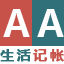
<style>
.page{position:relative;width:64px;height:64px;background:#2f7079}
.page>*{position:absolute;margin:0}
.t1{font:36px "MicrosoftYaHei";letter-spacing:0.18em;color:#fffefe}
.t2{font:14px "MicrosoftYaHei";letter-spacing:0.15em;color:#2f7079;font-weight:bold}
.t3{font:14px "MicrosoftYaHei";letter-spacing:0.15em;color:#c6524a;font-weight:bold}
</style>
<div class="page">
<p class="t1" style="left:3px;top:9px;width:61px;height:28px">AA</p>
<p class="t2" style="left:0px;top:49px;width:64px;height:13px">生活<span class="t3">记帐</span></p>
</div>
